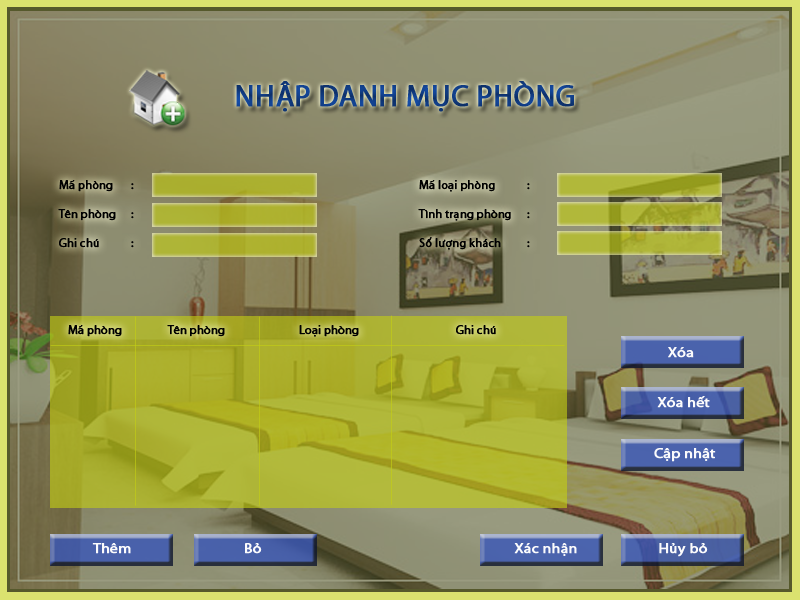
<style>
.page{position:relative;width:800px;height:600px}
.page>*{position:absolute;margin:0}
.t1{font:30px "MyriadPro-Regular";color:#113d85;text-transform:uppercase;font-weight:bold}
.t2{font:12px "MyriadPro-Regular";color:#000000;font-weight:bold}
.t3{font:12px "MyriadPro-Regular";color:#000000}
.t4{font:14px "MyriadPro-Regular";color:#fbfbfc;font-weight:bold;scale:1.11 1}
.t5{font:14px "MyriadPro-Regular";color:#fbfbfc}
</style>
<div class="page">
<p class="t1" style="left:236px;top:81px;width:338px;height:31px">Nhập danh mục phòng</p>
<p class="t2" style="left:58px;top:180px;width:472px;height:70px">Mã phòng :        Mã loại phòng :<br><br>Tên phòng :        Tình trạng phòng :<br><br>Ghi chú  :        Số lượng khách :</p>
<p class="t2" style="left:68px;top:325px;width:428px;height:12px"><span class="t3">   </span>Mã phòng  Tên phòng          Loại phòng   Ghi chú</p>
<p class="t4" style="left:654px;top:347px;width:62px;height:115px"><span class="t5">      </span>Xóa<br><br><br>  Xóa hết<br><br><br> Cập nhật</p>
<p class="t4" style="left:92px;top:543px;width:616px;height:14px">Thêm     Bỏ             Xác nhận        Hủy bỏ</p>
</div>
